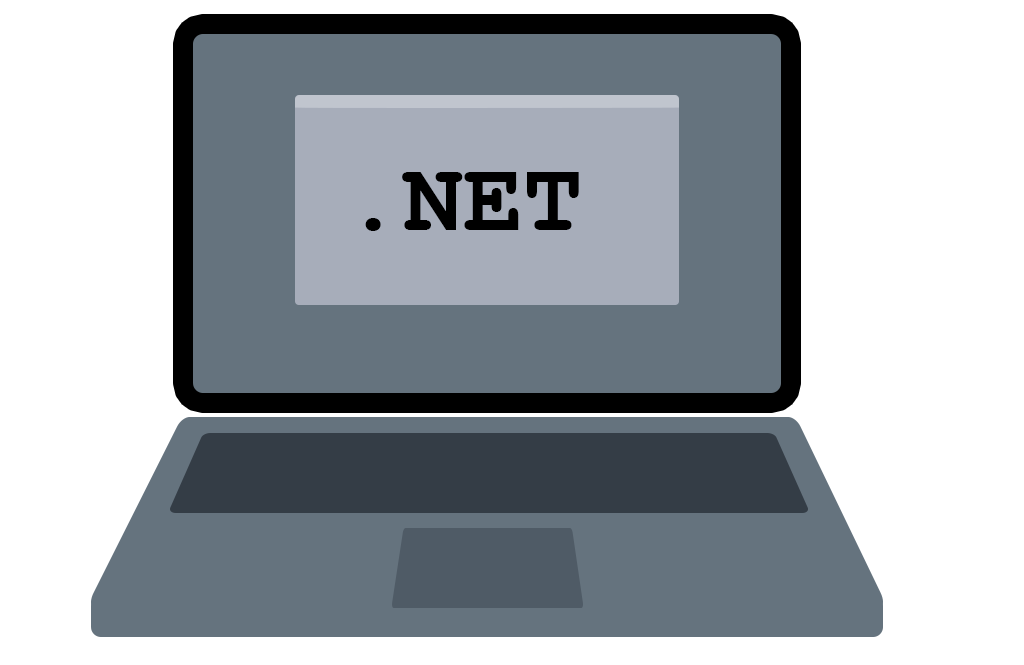
<style>
.page{position:relative;width:1024px;height:665px;background:#ffffff}
.page>*{position:absolute;margin:0}
.t1{font:100px "CourierNewPS-BoldMT";color:#000000}
</style>
<div class="page">
<p class="t1" style="left:365px;top:172px;width:214px;height:59px">.NET</p>
</div>
